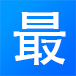
<style>
.page{position:relative;width:76px;height:76px}
.page>*{position:absolute;margin:0}
.t1{font:60px "STHeiti";color:#ffffff}
</style>
<div class="page">
<p class="t1" style="left:13px;top:12px;width:53px;height:53px">最</p>
</div>
